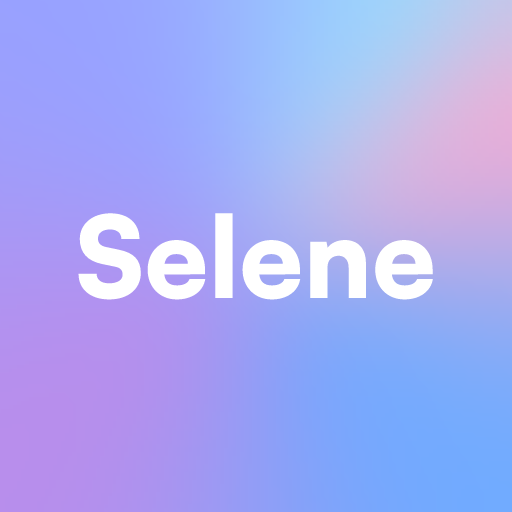
<style>
.page{position:relative;width:512px;height:512px}
.page>*{position:absolute;margin:0}
.t1{font:112.3px "Satoshi-Black";color:#ffffff}
</style>
<div class="page">
<p class="t1" style="left:78px;top:213px;width:355px;height:87px">Selene</p>
</div>
